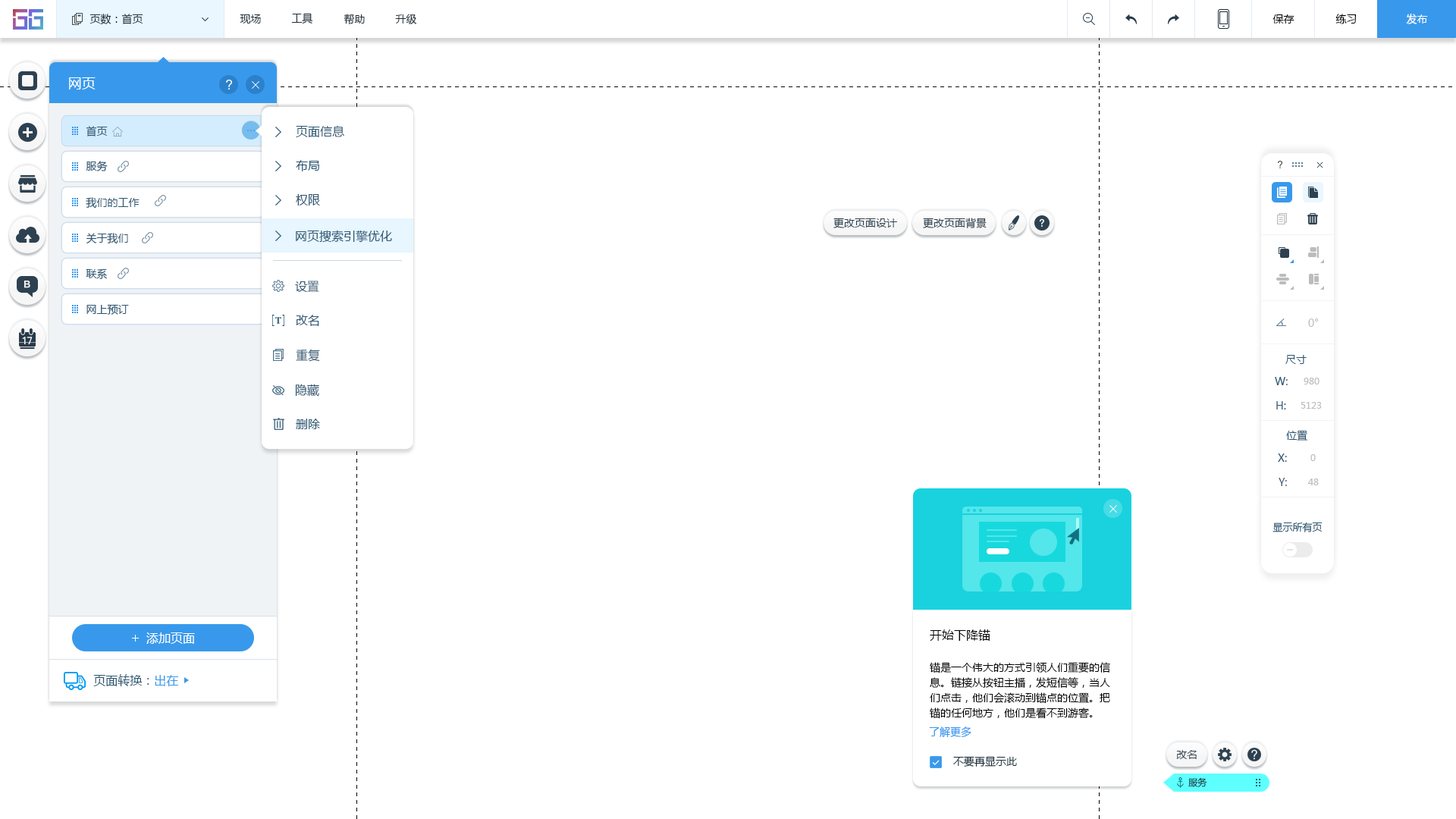
<style>
.page{position:relative;width:1456px;height:819px;background:#ffffff}
.page>*{position:absolute;margin:0}
.t1{font:10.6px "MicrosoftYaHei";color:#20303c}
.t2{font:10.6px "MicrosoftYaHei";color:#000000}
.t3{font:10.6px "MicrosoftYaHei";color:#ffffff}
.t4{font:13.6px "MicrosoftYaHei";color:#ffffff}
.t5{font:10.6px "MicrosoftYaHei";color:#2b5672}
.t6{font:12.1px "MicrosoftYaHei";color:#2b5672}
.t7{font:10.6px "MicrosoftYaHei";color:#2d4150}
.t8{font:10.6px "MicrosoftYaHei";color:#bcbcbc}
.t9{font:9.1px "MicrosoftYaHei";color:#bcbcbc}
.t10{font:9.9px "MicrosoftYaHei";color:#2b5672}
.t11{font:12.1px "MicrosoftYaHei";color:#000000}
.t12{font:12.1px "MicrosoftYaHei";color:#ffffff}
.t13{font:10.6px/15.2px "MicrosoftYaHei";color:#000000}
.t14{font:9.1px "MicrosoftYaHei";color:#2b5672}
.t15{font:9.1px "MicrosoftYaHei";color:#3899ec}
.t16{font:10.6px "MicrosoftYaHei";color:#3899ec}
.t17{font:10.6px "MicrosoftYaHei";color:#162d3d}
.t18{font:9.1px "MicrosoftYaHei";color:#162d3d}
</style>
<div class="page">
<p class="t1" style="left:89px;top:14px;width:54px;height:11px">页数：首页</p>
<p class="t1" style="left:240px;top:14px;width:21px;height:10px">现场</p>
<p class="t1" style="left:291px;top:13px;width:22px;height:11px">工具</p>
<p class="t1" style="left:344px;top:14px;width:21px;height:11px">帮助</p>
<p class="t1" style="left:395px;top:14px;width:22px;height:10px">升级</p>
<p class="t2" style="left:1272px;top:14px;width:22px;height:10px">保存</p>
<p class="t2" style="left:1335px;top:14px;width:22px;height:10px">练习</p>
<p class="t3" style="left:1406px;top:14px;width:22px;height:10px">发布</p>
<p class="t4" style="left:69px;top:77px;width:27px;height:12px">网页</p>
<p class="t5" style="left:86px;top:126px;width:22px;height:10px">首页</p>
<p class="t6" style="left:296px;top:125px;width:48px;height:12px">页面信息</p>
<p class="t5" style="left:86px;top:161px;width:22px;height:10px">服务</p>
<p class="t6" style="left:296px;top:160px;width:23px;height:11px">布局</p>
<p class="t5" style="left:86px;top:197px;width:54px;height:12px">我们的工作</p>
<p class="t6" style="left:296px;top:194px;width:24px;height:12px">权限</p>
<p class="t7" style="left:833px;top:218px;width:64px;height:10px">更改页面设计</p>
<p class="t7" style="left:923px;top:218px;width:64px;height:10px">更改页面背景</p>
<p class="t5" style="left:86px;top:233px;width:42px;height:11px">关于我们</p>
<p class="t6" style="left:296px;top:230px;width:96px;height:13px">网页搜索引擎优化</p>
<p class="t5" style="left:86px;top:268px;width:21px;height:11px">联系</p>
<p class="t6" style="left:295px;top:281px;width:24px;height:11px">设置</p>
<p class="t5" style="left:86px;top:304px;width:43px;height:11px">网上预订</p>
<p class="t6" style="left:296px;top:315px;width:23px;height:11px">改名</p>
<p class="t8" style="left:1308px;top:318px;width:11px;height:9px">0°</p>
<p class="t6" style="left:296px;top:349px;width:24px;height:13px">重复</p>
<p class="t5" style="left:1285px;top:355px;width:22px;height:9px">尺寸</p>
<p class="t5" style="left:1275px;top:377px;width:13px;height:8px">W:</p>
<p class="t9" style="left:1304px;top:378px;width:15px;height:6px">980</p>
<p class="t6" style="left:295px;top:384px;width:24px;height:13px">隐藏</p>
<p class="t5" style="left:1276px;top:401px;width:10px;height:8px">H:</p>
<p class="t9" style="left:1301px;top:402px;width:21px;height:7px">5123</p>
<p class="t6" style="left:296px;top:419px;width:24px;height:10px">删除</p>
<p class="t5" style="left:1286px;top:430px;width:22px;height:11px">位置</p>
<p class="t5" style="left:1278px;top:453px;width:9px;height:9px">X:</p>
<p class="t9" style="left:1310px;top:454px;width:6px;height:7px">0</p>
<p class="t5" style="left:1279px;top:478px;width:8px;height:8px">Y:</p>
<p class="t9" style="left:1308px;top:479px;width:11px;height:6px">48</p>
<p class="t10" style="left:1272px;top:522px;width:51px;height:10px">显示所有页</p>
<p class="t11" style="left:930px;top:629px;width:60px;height:12px">开始下降锚</p>
<p class="t12" style="left:146px;top:632px;width:49px;height:12px">添加页面</p>
<p class="t13" style="left:930px;top:662px;width:180px;height:57px">锚是一个伟大的方式引领人们重要的信息。链接从按钮主播，发短信等，当人们点击，他们会滚动到锚点的位置。把锚的任何地方，他们是看不到游客。</p>
<p class="t14" style="left:93px;top:674px;width:86px;height:12px">页面转换：<span class="t15">出在</span></p>
<p class="t16" style="left:929px;top:726px;width:42px;height:12px">了解更多</p>
<p class="t7" style="left:1176px;top:750px;width:21px;height:9px">改名</p>
<p class="t17" style="left:953px;top:756px;width:64px;height:11px">不要再显示此</p>
<p class="t18" style="left:1188px;top:777px;width:19px;height:10px">服务</p>
</div>
